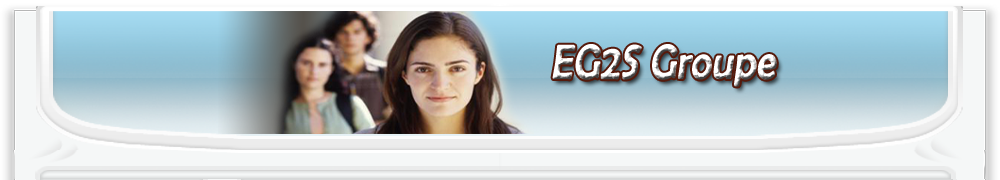
<style>
.page{position:relative;width:1000px;height:180px}
.page>*{position:absolute;margin:0}
.t1{font:48px "BerlinSansFB-Reg";font-weight:bold;font-style:italic;scale:0.8 1}
</style>
<div class="page">
<p class="t1" style="left:552px;top:44px;width:225px;height:43px">EG2S Groupe</p>
</div>
